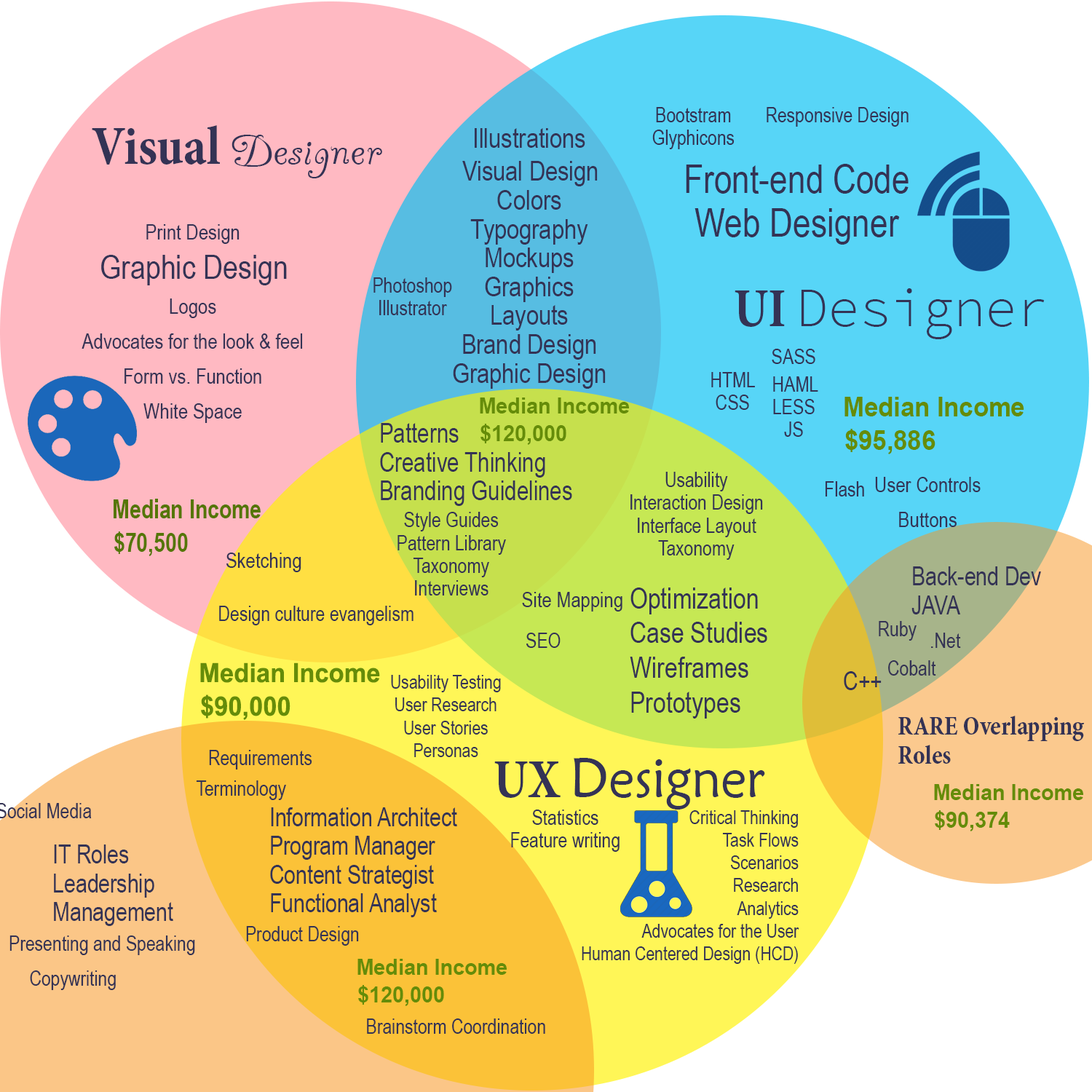
<style>
.page{position:relative;width:1092px;height:1092px}
.page>*{position:absolute;margin:0}
.t1{font:21.2px/27.3px "ArialNarrow";color:#343355;scale:0.96 1}
.t2{font:21.2px "ArialNarrow";color:#343355;scale:0.96 1}
.t3{font:55.4px "AYummyApology";color:#343355;scale:0.95 1}
.t4{font:55.4px "MinionPro-BoldCn";color:#343355;scale:0.95 1}
.t5{font:27.3px/33.4px "ArialNarrow";color:#343355}
.t6{font:39.4px/48.5px "ArialNarrow";color:#343355}
.t7{font:21.2px/39.4px "ArialNarrow";color:#343355}
.t8{font:33.4px/39.4px "ArialNarrow";color:#343355}
.t9{font:55.4px "SourceCodePro-Light";color:#343355;scale:0.95 1}
.t10{font:22.1px/27.3px "Arial-BoldMT";color:#658c09;scale:0.95 1}
.t11{font:6.4px/33.4px "Arial-BoldMT";color:#658c09;scale:0.95 1}
.t12{font:27.3px/33.4px "ArialNarrow";color:#343355;scale:0.96 1}
.t13{font:6.4px/33.4px "ArialNarrow-Bold";color:#557607;scale:0.95 1}
.t14{font:27.3px/27.3px "ArialNarrow";color:#343355;scale:0.96 1}
.t15{font:21.2px "ArialNarrow";color:#343355}
.t16{font:6.4px/33.4px "ArialNarrow";color:#343355;scale:0.95 1}
.t17{font:30.1px/39.4px "ArialNarrow";color:#343355;scale:0.95 1}
.t18{font:19.9px/27.3px "ArialNarrow";color:#343355;scale:0.95 1}
.t19{font:6.4px/33.4px "MinionPro-BoldCn";color:#343355;scale:0.95 1}
.t20{font:55.4px "MaiandraGD-Regular";color:#343355;scale:0.95 1}
</style>
<div class="page">
<p class="t1" style="left:652px;top:107px;width:83px;height:42px;text-align:center">Bootstram<br>Glyphicons</p>
<p class="t2" style="left:767px;top:107px;width:142px;height:20px">Responsive Design</p>
<p class="t3" style="left:92px;top:125px;width:290px;height:53px"><span class="t4">Visual </span>Designer</p>
<p class="t5" style="left:453px;top:128px;width:153px;height:261px;text-align:center">Illustrations<br>Visual Design<br>Colors<br>Typography<br>Mockups<br>Graphics<br>Layouts<br>Brand Design<br>Graphic Design</p>
<p class="t6" style="left:686px;top:164px;width:223px;height:81px;text-align:center">Front-end Code<br>Web Designer</p>
<p class="t7" style="left:82px;top:224px;width:221px;height:199px;text-align:center">Print Design<br><span class="t8">Graphic Design<br></span>Logos<br>Advocates for the look &amp; feel<br>Form vs. Function<br>White Space</p>
<p class="t1" style="left:373px;top:277px;width:79px;height:38px;text-align:center">Photoshop<br>Illustrator</p>
<p class="t9" style="left:735px;top:288px;width:310px;height:51px"><span class="t4">UI </span>Designer</p>
<p class="t1" style="left:772px;top:349px;width:46px;height:88px;text-align:center">SASS<br>HAML<br>LESS<br>JS</p>
<p class="t1" style="left:711px;top:372px;width:44px;height:38px;text-align:center">HTML<br>CSS</p>
<p class="t10" style="left:480px;top:397px;width:149px;height:48px">Median Income<br>$120,000</p>
<p class="t11" style="left:844px;top:397px;width:180px;height:57px">Median Income<br>$95,886</p>
<p class="t12" style="left:380px;top:423px;width:192px;height:83px">Patterns<br>Creative Thinking<br>Branding Guidelines</p>
<p class="t1" style="left:630px;top:472px;width:133px;height:88px;text-align:center">Usability<br>Interaction Design<br>Interface Layout<br>Taxonomy</p>
<p class="t2" style="left:825px;top:481px;width:39px;height:15px">Flash</p>
<p class="t7" style="left:875px;top:477px;width:106px;height:50px;text-align:center">User Controls<br>Buttons</p>
<p class="t13" style="left:114px;top:499px;width:147px;height:57px">Median Income<br>$70,500</p>
<p class="t1" style="left:397px;top:512px;width:109px;height:83px;text-align:center"><span class="t14"><br></span>Style Guides<br>Pattern Library<br>Taxonomy<br>Interviews</p>
<p class="t15" style="left:226px;top:553px;width:75px;height:19px">Sketching</p>
<p class="t16" style="left:911px;top:566px;width:130px;height:48px">Back-end Dev<br>JAVA</p>
<p class="t15" style="left:522px;top:592px;width:100px;height:20px">Site Mapping</p>
<p class="t17" style="left:630px;top:587px;width:137px;height:132px">Optimization<br>Case Studies<br>Wireframes<br>Prototypes</p>
<p class="t2" style="left:219px;top:606px;width:194px;height:19px">Design culture evangelism</p>
<p class="t2" style="left:879px;top:621px;width:38px;height:20px">Ruby</p>
<p class="t2" style="left:526px;top:633px;width:35px;height:15px">SEO</p>
<p class="t2" style="left:931px;top:633px;width:30px;height:15px">.Net</p>
<p class="t11" style="left:200px;top:662px;width:180px;height:58px">Median Income<br>$90,000</p>
<p class="t2" style="left:888px;top:660px;width:48px;height:16px">Cobalt</p>
<p class="t18" style="left:391px;top:675px;width:110px;height:82px;text-align:center">Usability Testing<br>User Research<br>User Stories<br>Personas</p>
<p class="t16" style="left:844px;top:671px;width:38px;height:19px">C++</p>
<p class="t19" style="left:898px;top:716px;width:186px;height:48px">RARE Overlapping<br>Roles</p>
<p class="t2" style="left:209px;top:750px;width:103px;height:19px">Requirements</p>
<p class="t20" style="left:494px;top:758px;width:271px;height:52px"><span class="t4">UX </span>Designer</p>
<p class="t2" style="left:196px;top:780px;width:90px;height:20px">Terminology</p>
<p class="t10" style="left:934px;top:784px;width:149px;height:47px">Median Income<br>$90,374</p>
<p class="t16" style="left:270px;top:807px;width:187px;height:110px">Information Architect<br>Program Manager<br>Content Strategist<br>Functional Analyst</p>
<p class="t1" style="left:511px;top:810px;width:109px;height:42px;text-align:center">Statistics<br>Feature writing</p>
<p class="t18" style="left:582px;top:810px;width:217px;height:154px;text-align:right">Critical Thinking<br>Task Flows<br>Scenarios<br>Research<br>Analytics<br>Advocates for the User<br>Human Centered Design (HCD)</p>
<p class="t16" style="left:54px;top:844px;width:119px;height:82px">IT Roles<br>Leadership<br>Management</p>
<p class="t2" style="left:246px;top:926px;width:113px;height:20px">Product Design</p>
<p class="t2" style="left:9px;top:935px;width:186px;height:20px">Presenting and Speaking</p>
<p class="t10" style="left:357px;top:959px;width:150px;height:47px">Median Income<br>$120,000</p>
<p class="t2" style="left:30px;top:970px;width:86px;height:20px">Copywriting</p>
<p class="t2" style="left:367px;top:1018px;width:178px;height:16px">Brainstorm Coordination</p>
</div>
